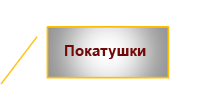
<style>
.page{position:relative;width:224px;height:108px;background:#ffffff}
.page>*{position:absolute;margin:0}
.t1{font:15.2px "Arial-BoldMT";color:#720909}
</style>
<div class="page">
<p class="t1" style="left:65px;top:45px;width:81px;height:14px">Покатушки</p>
</div>
